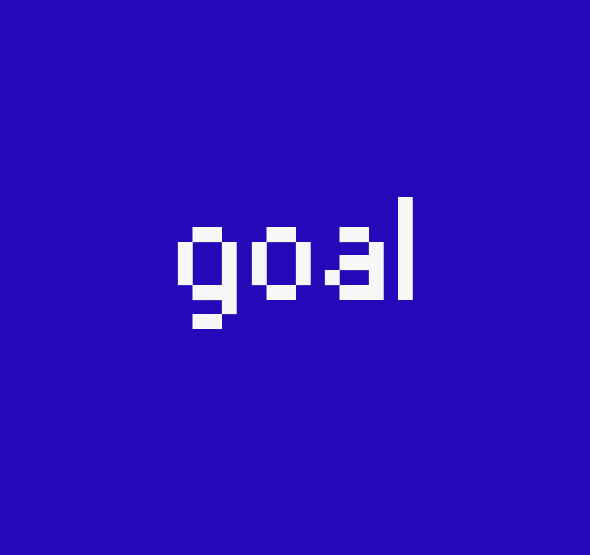
<style>
.page{position:relative;width:590px;height:555px;background:#2509b8}
.page>*{position:absolute;margin:0}
.t1{font:150px "Munro";color:#f7f7f7}
</style>
<div class="page">
<p class="t1" style="left:177px;top:197px;width:236px;height:132px">goal</p>
</div>
